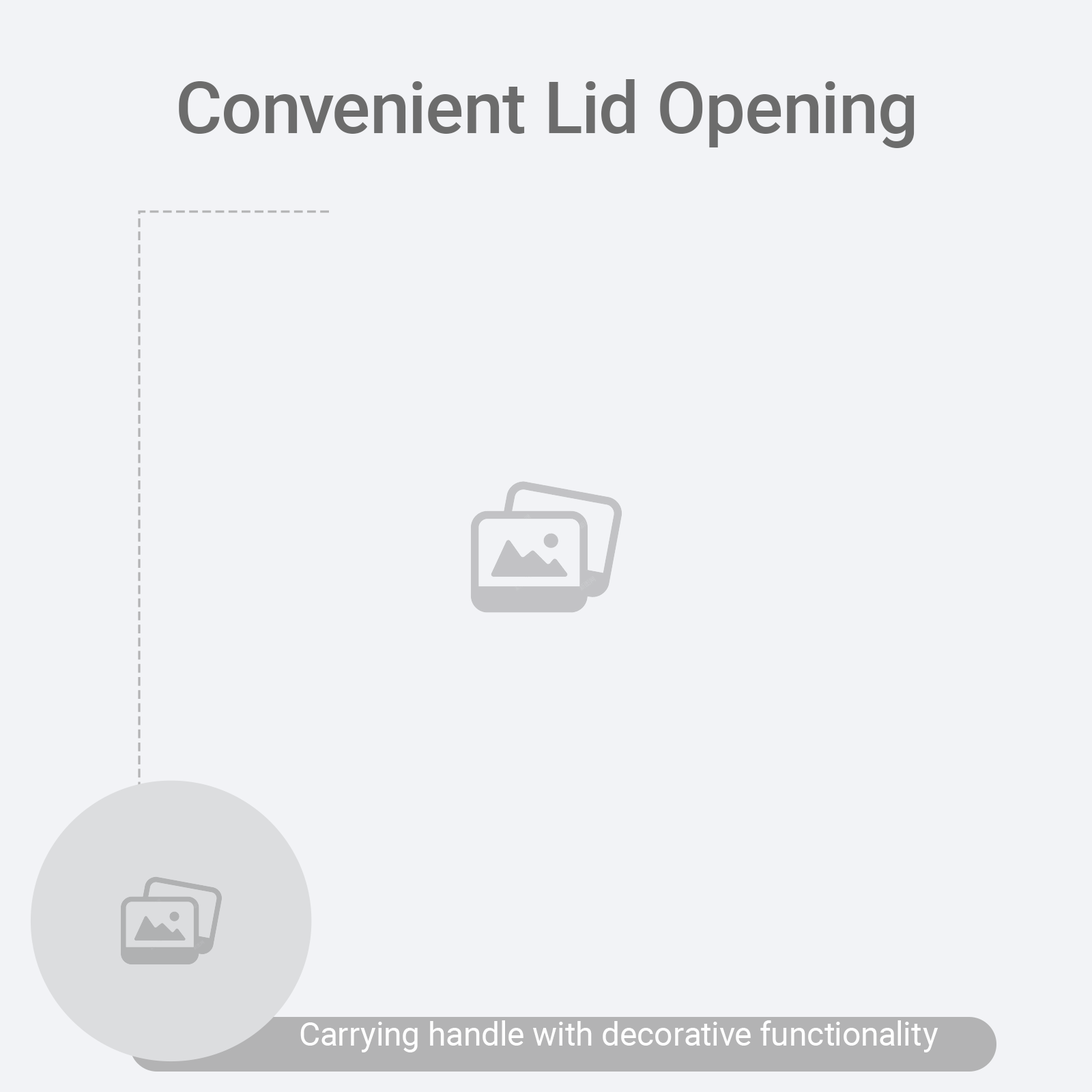
<style>
.page{position:relative;width:1092px;height:1092px;background:#f2f3f6}
.page>*{position:absolute;margin:0}
.t1{font:71.3px "Roboto-Medium";color:#6c6c6c}
.t2{font:32.8px "Roboto-Regular";color:#ffffff}
</style>
<div class="page">
<p class="t1" style="left:179px;top:79px;width:736px;height:69px">Convenient Lid Opening</p>
<p class="t2" style="left:300px;top:1020px;width:638px;height:32px">Carrying handle with decorative functionality</p>
</div>
